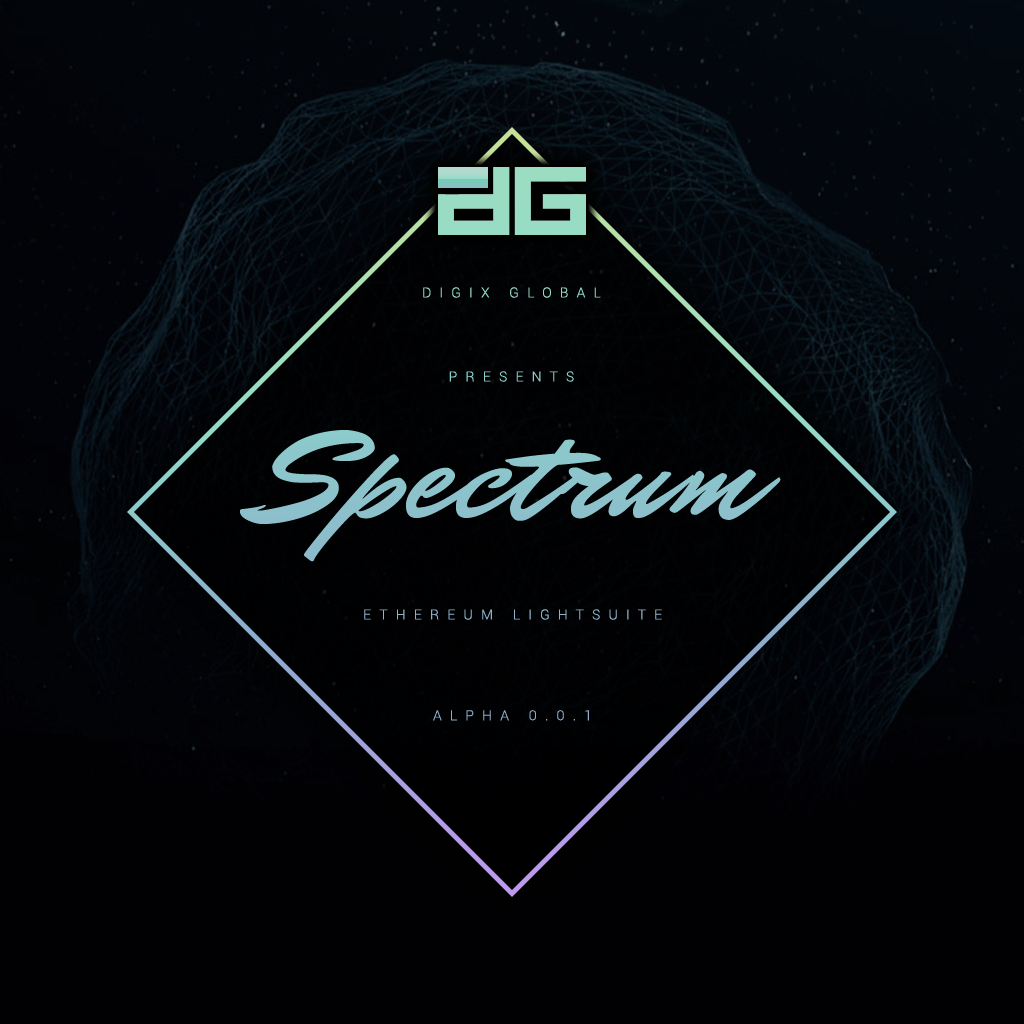
<style>
.page{position:relative;width:1024px;height:1024px;background:#010103}
.page>*{position:absolute;margin:0}
.t1{font:14px "Roboto-Light";letter-spacing:0.58em;color:#8ed1cb;text-transform:uppercase}
.t2{font:135px "MrDafoe-Regular";letter-spacing:0.02em;color:#8cc3cb}
.t3{font:14px "Roboto-Light";letter-spacing:0.58em;color:#8cb4cb;text-transform:uppercase}
</style>
<div class="page">
<p class="t1" style="left:423px;top:287px;width:178px;height:95px;text-align:center">digix global<br><br><br><br><br>Presents</p>
<p class="t2" style="left:240px;top:430px;width:541px;height:132px">Spectrum</p>
<p class="t3" style="left:364px;top:609px;width:298px;height:112px;text-align:center">Ethereum Lightsuite<br><br><br><br><br><br>Alpha 0.0.1</p>
</div>
